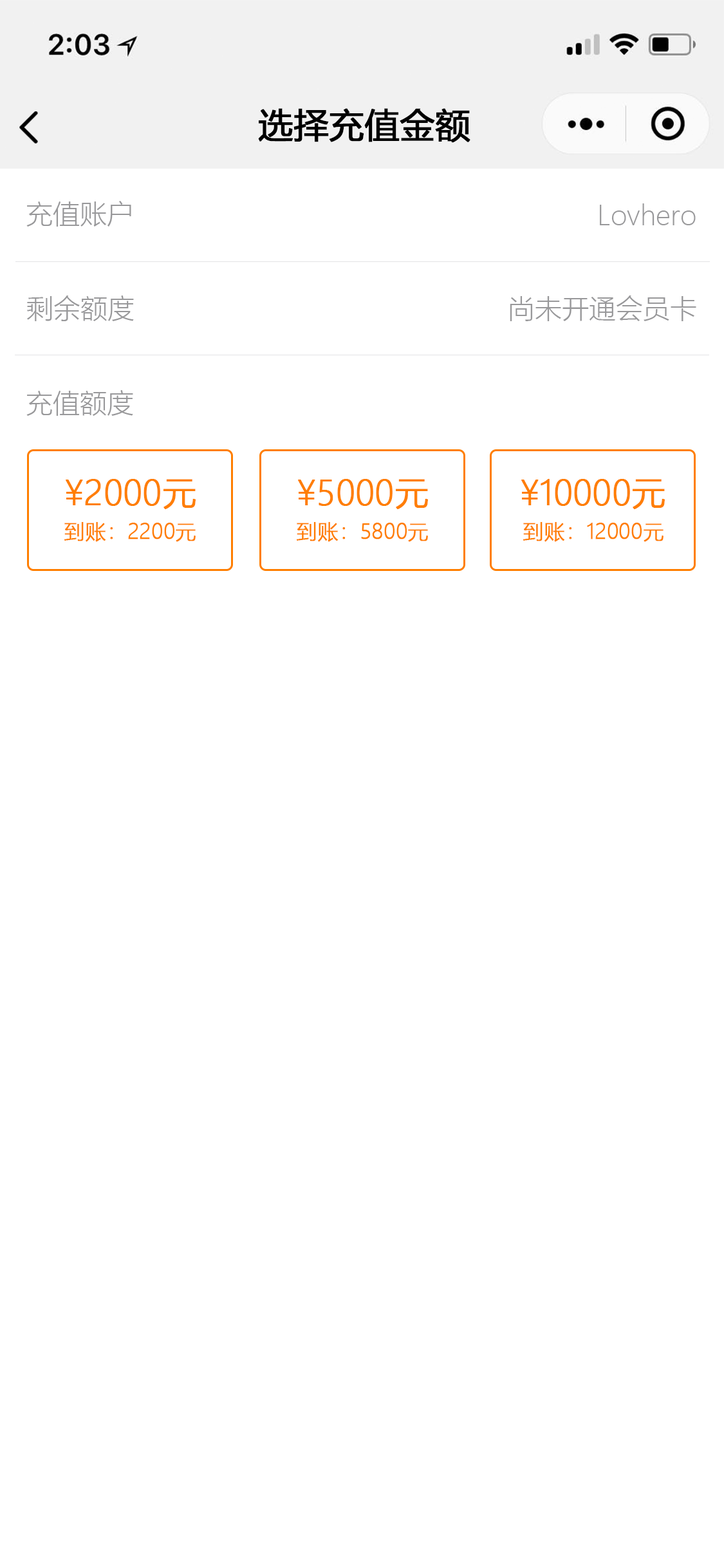
<style>
.page{position:relative;width:724px;height:1568px;background:#ffffff}
.page>*{position:absolute;margin:0}
.t1{font:34.5px "MicrosoftYaHei";color:#000000;font-weight:bold}
.t2{font:27px "MicrosoftYaHeiLight";color:#98989a}
.t3{font:33.5px "MicrosoftYaHeiLight";color:#ff7e00;font-weight:bold}
.t4{font:20.6px "MicrosoftYaHeiLight";color:#ff7e00;font-weight:bold}
</style>
<div class="page">
<p class="t1" style="left:258px;top:108px;width:213px;height:35px">选择充值金额</p>
<p class="t2" style="left:26px;top:201px;width:105px;height:26px">充值账户</p>
<p class="t2" style="left:600px;top:203px;width:96px;height:22px">Lovhero</p>
<p class="t2" style="left:27px;top:295px;width:107px;height:26px">剩余额度</p>
<p class="t2" style="left:510px;top:295px;width:186px;height:26px">尚未开通会员卡</p>
<p class="t2" style="left:26px;top:390px;width:107px;height:26px">充值额度</p>
<p class="t3" style="left:66px;top:479px;width:130px;height:30px">¥2000元</p>
<p class="t3" style="left:298px;top:479px;width:130px;height:30px">¥5000元</p>
<p class="t3" style="left:521px;top:479px;width:144px;height:30px">¥10000元</p>
<p class="t4" style="left:64px;top:522px;width:132px;height:20px">到账：2200元</p>
<p class="t4" style="left:297px;top:522px;width:131px;height:20px">到账：5800元</p>
<p class="t4" style="left:523px;top:522px;width:141px;height:20px">到账：12000元</p>
</div>
